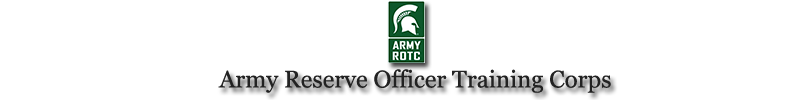
<style>
.page{position:relative;width:800px;height:100px;background:#ffffff}
.page>*{position:absolute;margin:0}
.t1{font:24px "Georgia";color:#222222}
</style>
<div class="page">
<p class="t1" style="left:218px;top:69px;width:393px;height:24px">Army Reserve Officer Training Corps</p>
</div>
